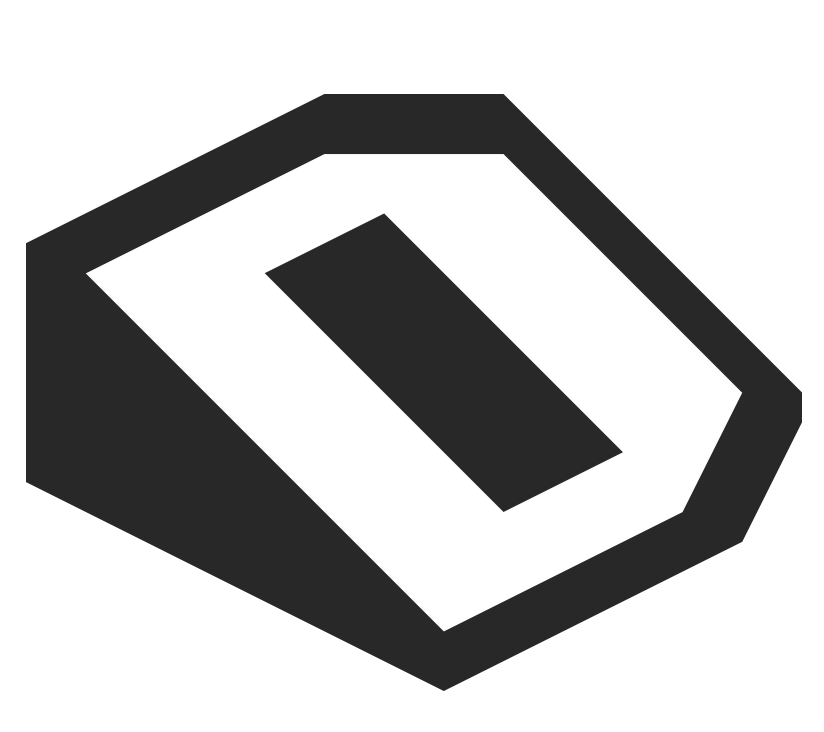
<style>
.page{position:relative;width:824px;height:732px;background:#ffffff}
.page>*{position:absolute;margin:0}
.t1{font:954.9px "Slice";letter-spacing:-0.155em;color:#282828}
</style>
<div class="page">
<p class="t1" style="left:26px;top:94px;width:776px;height:597px">d</p>
</div>
